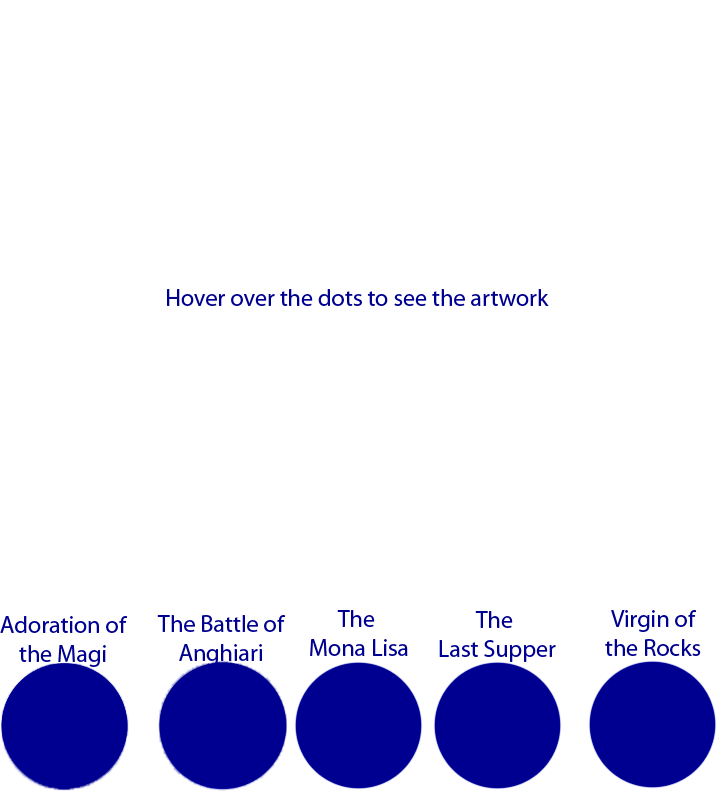
<style>
.page{position:relative;width:720px;height:792px;background:#ffffff}
.page>*{position:absolute;margin:0}
.t1{font:24px "MyriadPro-Regular";color:#000090}
</style>
<div class="page">
<p class="t1" style="left:167px;top:289px;width:382px;height:17px">Hover over the dots to see the artwork</p>
<p class="t1" style="left:0px;top:616px;width:128px;height:51px;text-align:center">Adoration of<br>the Magi</p>
<p class="t1" style="left:157px;top:615px;width:129px;height:51px;text-align:center">The Battle of<br>Anghiari</p>
<p class="t1" style="left:310px;top:610px;width:98px;height:46px;text-align:center">The <br>Mona Lisa</p>
<p class="t1" style="left:439px;top:611px;width:117px;height:51px;text-align:center">The <br>Last Supper</p>
<p class="t1" style="left:605px;top:610px;width:96px;height:46px;text-align:center">Virgin of<br>the Rocks</p>
</div>
